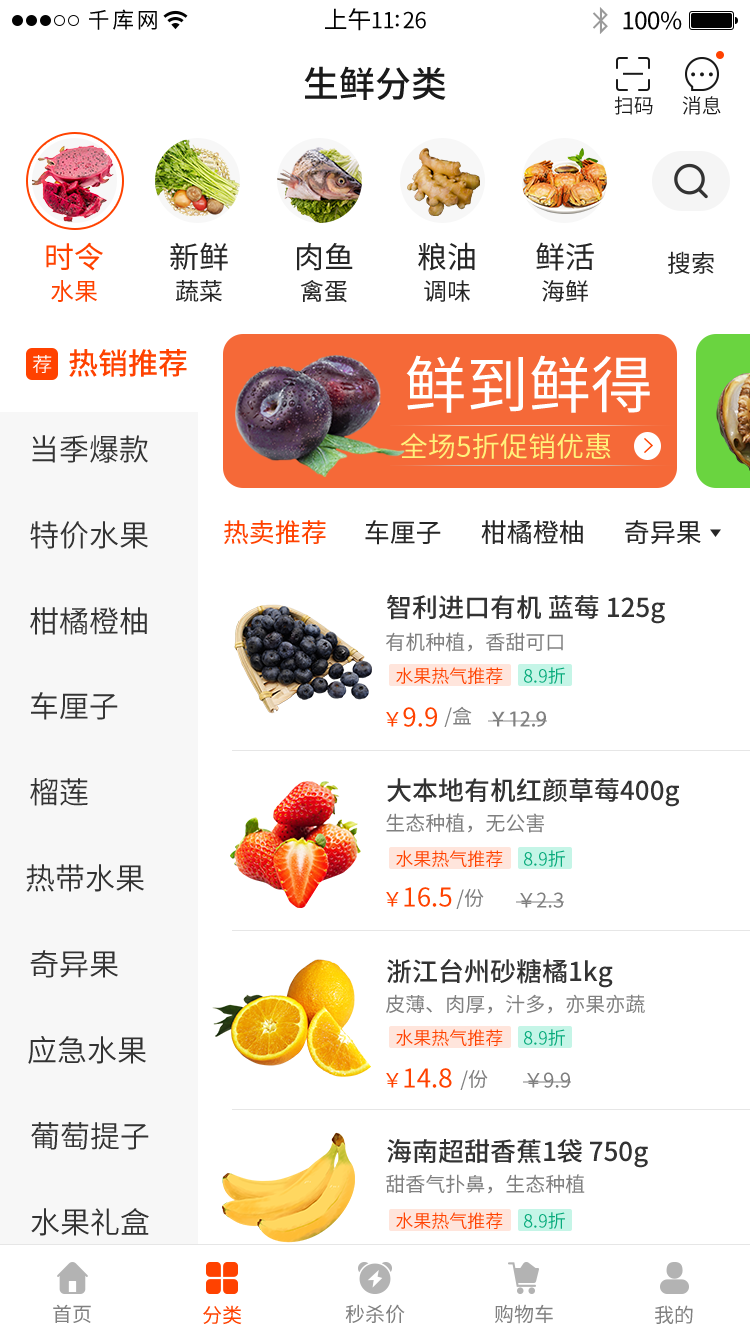
<style>
.page{position:relative;width:750px;height:1334px;background:#ffffff}
.page>*{position:absolute;margin:0}
.t1{font:22px "SourceHanSansCN-Regular";letter-spacing:0.12em;color:#030303}
.t2{font:22px "SourceHanSansCN-Regular";letter-spacing:-0.02em;color:#030303}
.t3{font:24px "SourceHanSansCN-Regular";letter-spacing:-0.02em;color:#030303}
.t4{font:36px "SourceHanSansCN-Medium";color:#1a1a1a}
.t5{font:20px "SourceHanSansCN-Normal";color:#1a1a1a}
.t6{font:30px "SourceHanSansCN-Regular";color:#ff4200}
.t7{font:30px "SourceHanSansCN-Regular";color:#262626}
.t8{font:24px "SourceHanSansCN-Regular";color:#262626}
.t9{font:24px "SourceHanSansCN-Regular";color:#ff4200}
.t10{font:30px "SourceHanSansCN-Medium";color:#ff4200}
.t11{font:20px "SourceHanSansCN-Normal";color:#ffffff}
.t12{font:62px "SourceHanSansCN-Regular";color:#ffffff}
.t13{font:30px "SourceHanSansCN-Normal";color:#343434}
.t14{font:28px "SourceHanSansCN-Regular";color:#fff17b}
.t15{font:26px "SourceHanSansCN-Regular";color:#ff4200}
.t16{font:26px "SourceHanSansCN-Regular";color:#262626}
.t17{font:26px "SourceHanSansCN-Medium";color:#333333}
.t18{font:20px "SourceHanSansCN-Regular";color:#808080}
.t19{font:18px "SourceHanSansCN-Normal";color:#ff4200}
.t20{font:18px "SourceHanSansCN-Normal";color:#09ab7c}
.t21{font:20px "SourceHanSansCN-Regular";color:#ff4200}
.t22{font:20px "AdobeHeitiStd-Regular";color:#808080}
.t23{font:30px "SourceHanSansCN-Normal";color:#333333}
</style>
<div class="page">
<p class="t1" style="left:89px;top:9px;width:68px;height:21px">千库网</p>
<p class="t2" style="left:325px;top:8px;width:101px;height:23px"><span class="t3">上午</span>11:26</p>
<p class="t3" style="left:623px;top:11px;width:59px;height:19px">100%</p>
<p class="t4" style="left:304px;top:66px;width:142px;height:34px">生鲜分类</p>
<p class="t5" style="left:614px;top:96px;width:39px;height:19px">扫码</p>
<p class="t5" style="left:682px;top:96px;width:39px;height:19px">消息</p>
<p class="t6" style="left:46px;top:242px;width:57px;height:29px">时令</p>
<p class="t7" style="left:170px;top:242px;width:58px;height:29px">新鲜</p>
<p class="t7" style="left:297px;top:243px;width:56px;height:28px">肉鱼</p>
<p class="t7" style="left:418px;top:242px;width:57px;height:29px">粮油</p>
<p class="t7" style="left:536px;top:242px;width:58px;height:29px">鲜活</p>
<p class="t8" style="left:668px;top:251px;width:46px;height:23px">搜索</p>
<p class="t9" style="left:51px;top:280px;width:46px;height:22px">水果</p>
<p class="t8" style="left:176px;top:280px;width:46px;height:22px">蔬菜</p>
<p class="t8" style="left:300px;top:280px;width:47px;height:23px">禽蛋</p>
<p class="t8" style="left:424px;top:280px;width:46px;height:22px">调味</p>
<p class="t8" style="left:542px;top:280px;width:46px;height:22px">海鲜</p>
<p class="t10" style="left:69px;top:349px;width:118px;height:28px">热销推荐</p>
<p class="t11" style="left:32px;top:355px;width:20px;height:18px">荐</p>
<p class="t12" style="left:406px;top:355px;width:244px;height:58px">鲜到鲜得</p>
<p class="t13" style="left:32px;top:435px;width:116px;height:28px">当季爆款</p>
<p class="t14" style="left:400px;top:433px;width:211px;height:26px">全场5折促销优惠</p>
<p class="t13" style="left:30px;top:521px;width:118px;height:28px">特价水果</p>
<p class="t15" style="left:224px;top:520px;width:102px;height:25px">热卖推荐</p>
<p class="t16" style="left:365px;top:520px;width:76px;height:25px">车厘子</p>
<p class="t16" style="left:481px;top:520px;width:102px;height:24px">柑橘橙柚</p>
<p class="t16" style="left:625px;top:520px;width:76px;height:25px">奇异果</p>
<p class="t17" style="left:387px;top:594px;width:278px;height:30px">智利进口有机 蓝莓 125g</p>
<p class="t13" style="left:30px;top:607px;width:117px;height:28px">柑橘橙柚</p>
<p class="t18" style="left:386px;top:632px;width:177px;height:20px">有机种植，香甜可口</p>
<p class="t19" style="left:396px;top:667px;width:107px;height:17px">水果热气推荐</p>
<p class="t20" style="left:524px;top:667px;width:41px;height:17px">8.9折</p>
<p class="t13" style="left:31px;top:692px;width:87px;height:28px">车厘子</p>
<p class="t15" style="left:386px;top:707px;width:51px;height:20px"><span class="t21">￥</span>9.9</p>
<p class="t18" style="left:444px;top:706px;width:28px;height:21px">/盒</p>
<p class="t22" style="left:488px;top:711px;width:59px;height:16px">￥12.9</p>
<p class="t23" style="left:30px;top:778px;width:58px;height:28px">榴莲</p>
<p class="t17" style="left:387px;top:778px;width:292px;height:29px">大本地有机红颜草莓400g</p>
<p class="t18" style="left:386px;top:813px;width:158px;height:20px">生态种植，无公害</p>
<p class="t19" style="left:396px;top:850px;width:107px;height:17px">水果热气推荐</p>
<p class="t20" style="left:524px;top:850px;width:41px;height:17px">8.9折</p>
<p class="t23" style="left:26px;top:864px;width:118px;height:28px">热带水果</p>
<p class="t15" style="left:386px;top:887px;width:66px;height:20px"><span class="t21">￥</span>16.5</p>
<p class="t18" style="left:456px;top:888px;width:28px;height:21px">/份</p>
<p class="t18" style="left:516px;top:892px;width:48px;height:16px">￥2.3</p>
<p class="t23" style="left:30px;top:950px;width:88px;height:28px">奇异果</p>
<p class="t17" style="left:387px;top:959px;width:226px;height:29px">浙江台州砂糖橘1kg</p>
<p class="t18" style="left:386px;top:994px;width:259px;height:20px">皮薄、肉厚，汁多，亦果亦蔬</p>
<p class="t23" style="left:28px;top:1036px;width:118px;height:28px">应急水果</p>
<p class="t19" style="left:396px;top:1029px;width:107px;height:17px">水果热气推荐</p>
<p class="t20" style="left:524px;top:1029px;width:41px;height:17px">8.9折</p>
<p class="t15" style="left:386px;top:1068px;width:66px;height:20px"><span class="t21">￥</span>14.8</p>
<p class="t18" style="left:460px;top:1069px;width:28px;height:21px">/份</p>
<p class="t18" style="left:523px;top:1072px;width:48px;height:16px">￥9.9</p>
<p class="t23" style="left:31px;top:1122px;width:118px;height:28px">葡萄提子</p>
<p class="t17" style="left:387px;top:1139px;width:261px;height:29px">海南超甜香蕉1袋 750g</p>
<p class="t18" style="left:386px;top:1174px;width:199px;height:20px">甜香气扑鼻，生态种植</p>
<p class="t23" style="left:31px;top:1208px;width:118px;height:28px">水果礼盒</p>
<p class="t19" style="left:396px;top:1212px;width:107px;height:17px">水果热气推荐</p>
<p class="t20" style="left:524px;top:1212px;width:41px;height:17px">8.9折</p>
<p class="t18" style="left:53px;top:1304px;width:38px;height:19px">首页</p>
<p class="t21" style="left:203px;top:1305px;width:39px;height:20px">分类</p>
<p class="t18" style="left:345px;top:1304px;width:60px;height:20px">秒杀价</p>
<p class="t18" style="left:495px;top:1304px;width:58px;height:20px">购物车</p>
<p class="t18" style="left:655px;top:1305px;width:38px;height:19px">我的</p>
</div>
